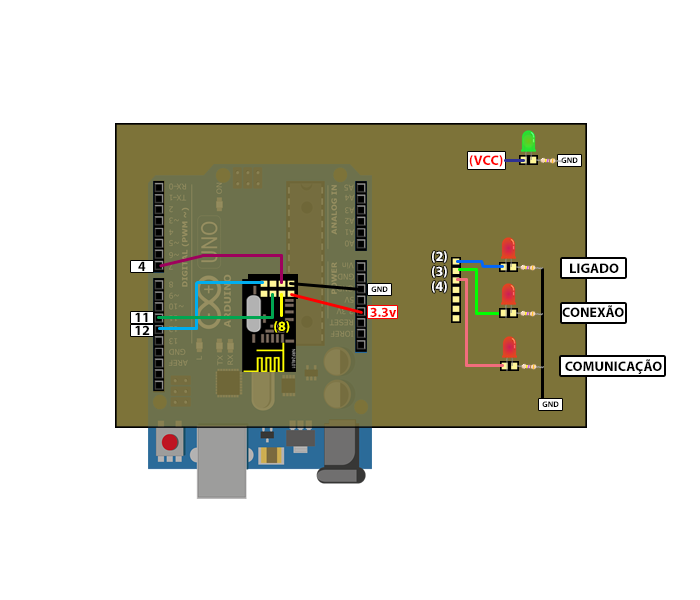
<style>
.page{position:relative;width:700px;height:600px;background:#ffffff}
.page>*{position:absolute;margin:0}
.t1{font:14px "MyriadPro-Bold";color:#ff0000}
.t2{font:14px "MyriadPro-Bold";color:#ffffff}
.t3{font:14px "MyriadPro-Bold";color:#000000}
.t4{font:14px "MyriadPro-Bold";color:#ff0101}
.t5{font:14px "MyriadPro-Bold";color:#ffff00}
</style>
<div class="page">
<p class="t1" style="left:469px;top:155px;width:34px;height:12px">(VCC)</p>
<p class="t2" style="left:432px;top:251px;width:15px;height:12px">(2)</p>
<p class="t3" style="left:138px;top:261px;width:8px;height:10px">4</p>
<p class="t2" style="left:432px;top:266px;width:15px;height:12px">(3)</p>
<p class="t3" style="left:570px;top:263px;width:49px;height:10px">LIGADO</p>
<p class="t2" style="left:432px;top:281px;width:15px;height:12px">(4)</p>
<p class="t3" style="left:562px;top:305px;width:62px;height:12px">CONEXÃO</p>
<p class="t3" style="left:135px;top:312px;width:13px;height:10px">11</p>
<p class="t4" style="left:370px;top:307px;width:27px;height:10px">3.3v</p>
<p class="t3" style="left:135px;top:325px;width:15px;height:10px">12</p>
<p class="t5" style="left:274px;top:321px;width:16px;height:12px">(8)</p>
<p class="t3" style="left:565px;top:359px;width:97px;height:15px">COMUNICAÇÃO</p>
</div>
